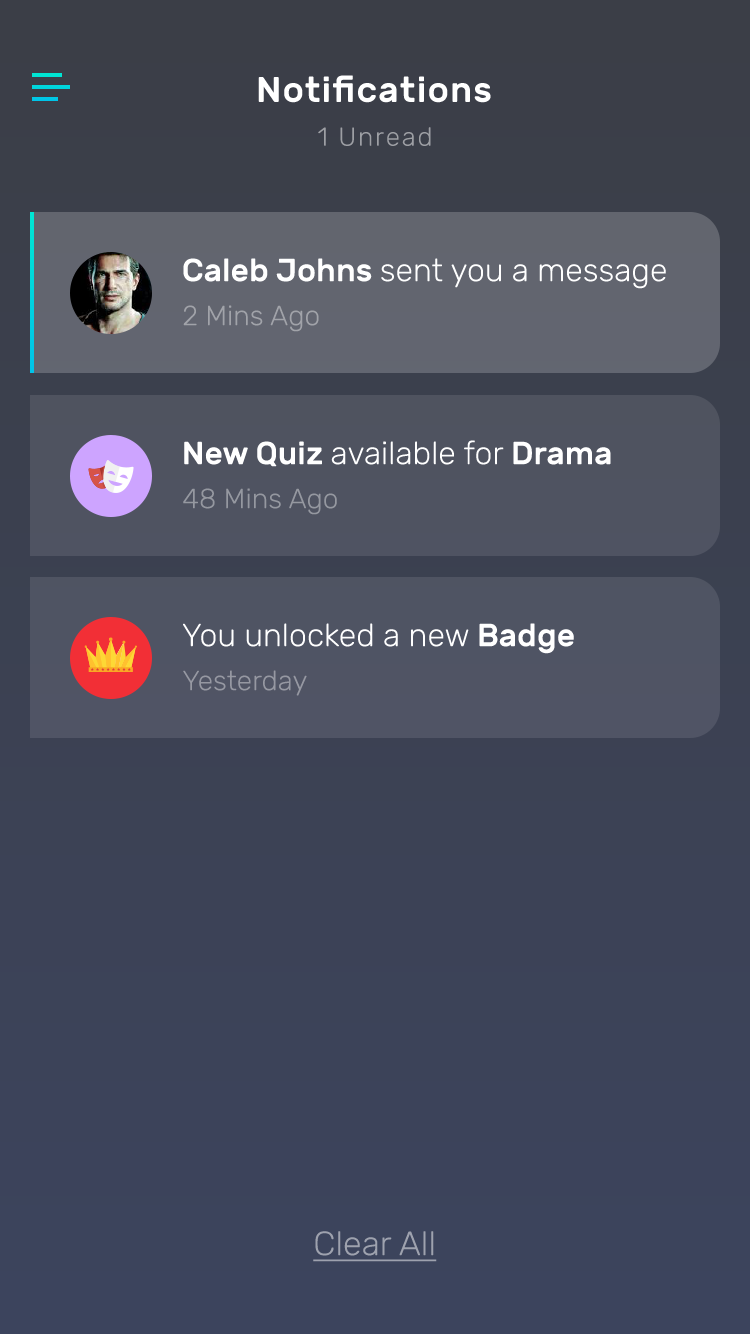
<style>
.page{position:relative;width:750px;height:1334px}
.page>*{position:absolute;margin:0}
.t1{font:36px "Rubik-Medium";letter-spacing:0.03em;color:#ffffff}
.t2{font:26px "Rubik-Light";letter-spacing:0.07em;color:#9d9fa4}
.t3{font:32px "Rubik-Light";color:#ffffff}
.t4{font:32px "Rubik-Medium";color:#ffffff}
.t5{font:28px "Rubik-Light";color:#a1a3a9}
.t6{font:28px "Rubik-Light";color:#9598a0}
.t7{font:28px "Rubik-Light";color:#9698a2}
.t8{font:34px "Rubik-Light";color:#9ea2ae;text-decoration:underline}
</style>
<div class="page">
<p class="t1" style="left:258px;top:75px;width:233px;height:28px">Notifications</p>
<p class="t2" style="left:318px;top:127px;width:113px;height:19px">1 Unread</p>
<p class="t3" style="left:183px;top:258px;width:483px;height:31px"><span class="t4">Caleb Johns </span>sent you a message</p>
<p class="t5" style="left:183px;top:305px;width:136px;height:27px">2 Mins Ago</p>
<p class="t3" style="left:184px;top:440px;width:427px;height:27px"><span class="t4">New Quiz </span>available for<span class="t4"> Drama</span></p>
<p class="t6" style="left:183px;top:488px;width:154px;height:27px">48 Mins Ago</p>
<p class="t3" style="left:183px;top:623px;width:391px;height:31px">You unlocked a new<span class="t4"> Badge</span></p>
<p class="t7" style="left:183px;top:670px;width:124px;height:26px">Yesterday</p>
<p class="t8" style="left:313px;top:1231px;width:124px;height:31px">Clear All</p>
</div>
